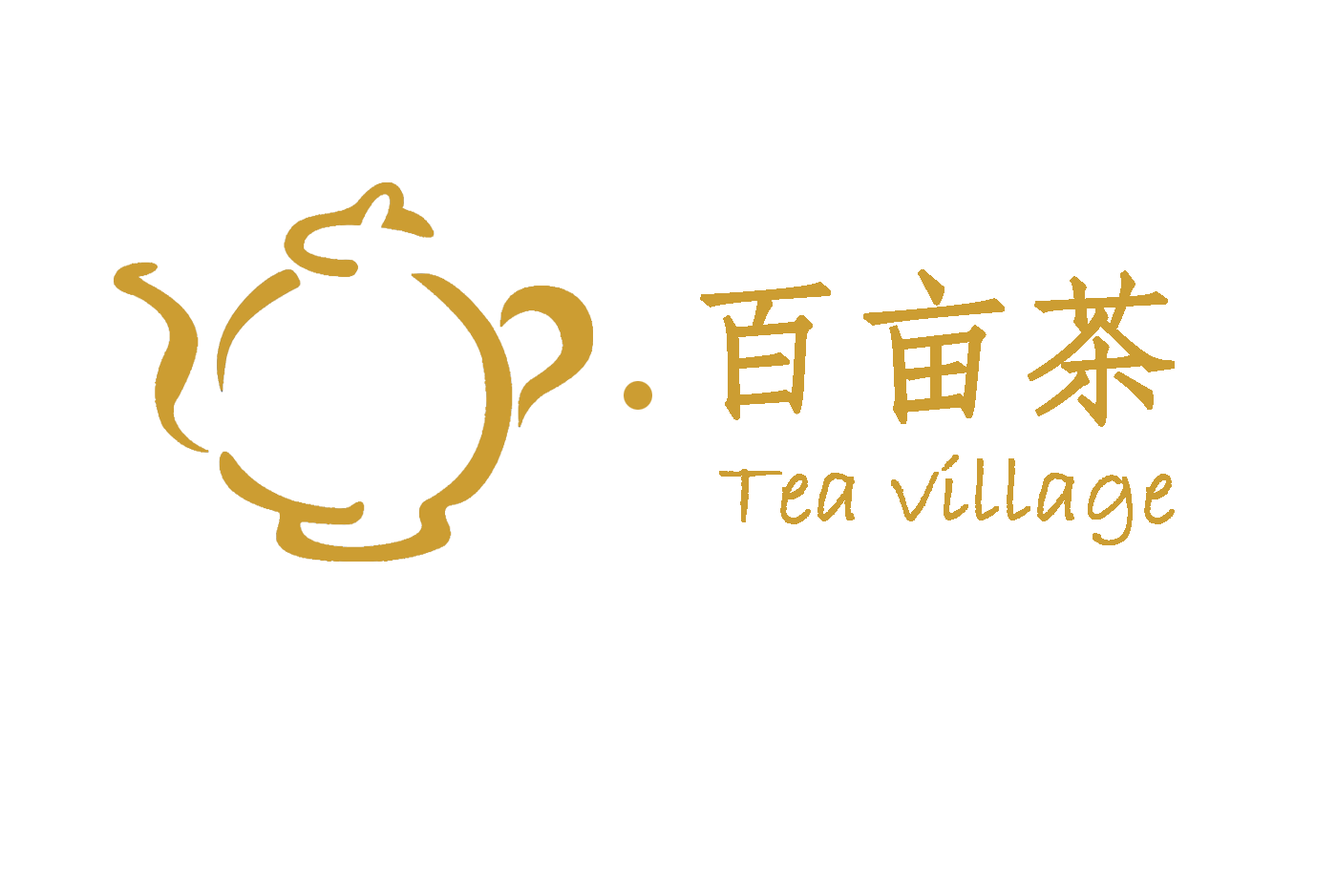
<style>
.page{position:relative;width:1337px;height:892px;background:#ffffff}
.page>*{position:absolute;margin:0}
.t1{font:162.3px "STFangsong";color:#cc9d32;font-weight:bold}
.t2{font:95.5px "BradleyHandITC";color:#cc9d32;font-weight:bold}
</style>
<div class="page">
<p class="t1" style="left:700px;top:269px;width:475px;height:158px">百亩茶</p>
<p class="t2" style="left:719px;top:455px;width:456px;height:90px">Tea village</p>
</div>
